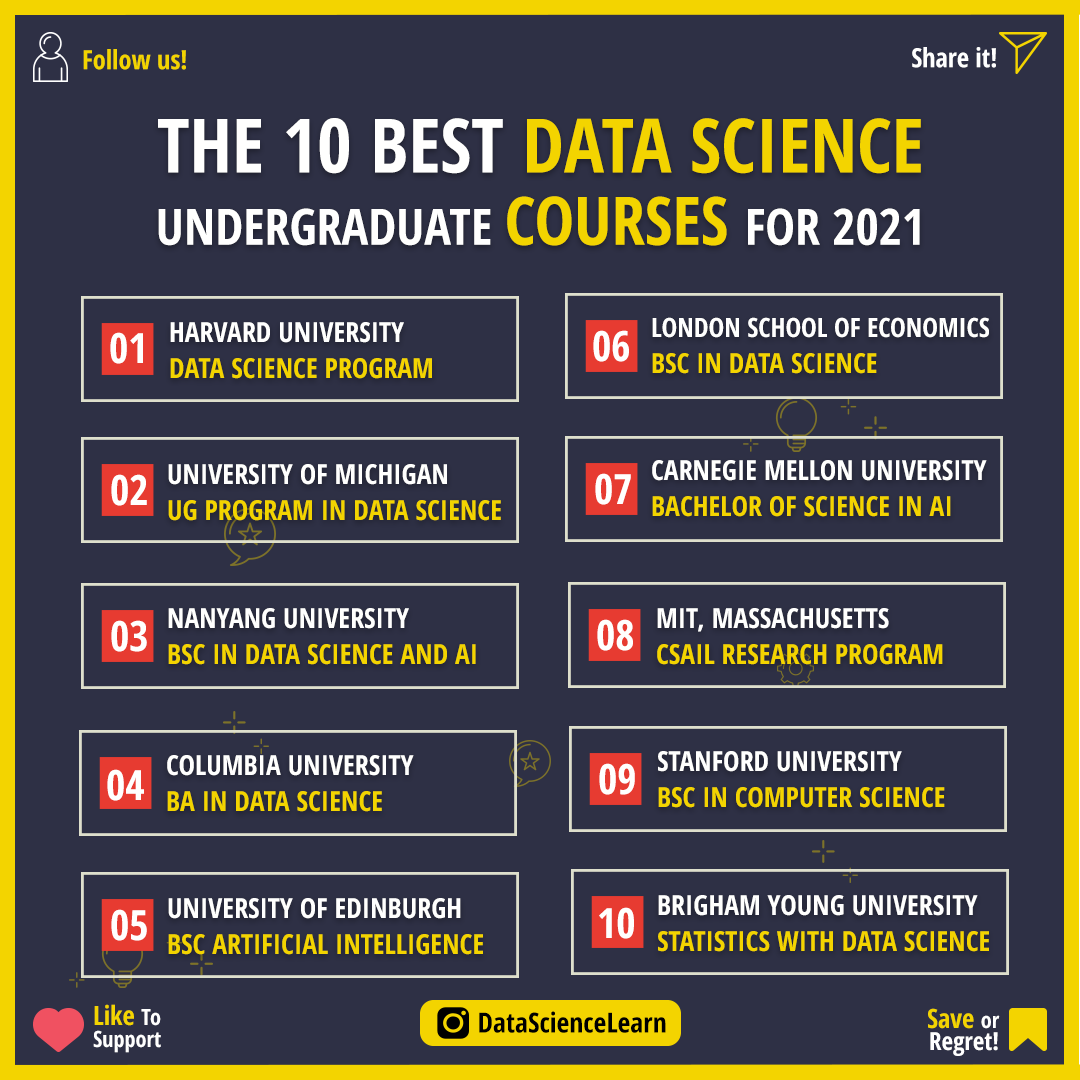
<style>
.page{position:relative;width:1080px;height:1080px;background:#2e3045}
.page>*{position:absolute;margin:0}
.t1{font:26.4px "OpenSans-CondensedBold";color:#f3d400}
.t2{font:26.4px "OpenSans-CondensedBold";color:#ffffff}
.t3{font:50px/72.2px "OpenSans-CondensedBold";color:#fffffe}
.t4{font:75px/72.2px "OpenSans-CondensedBold";color:#fffffe}
.t5{font:75px/72.2px "OpenSans-CondensedBold";color:#f3d400}
.t6{font:66.7px/72.2px "OpenSans-CondensedBold";color:#f3d400}
.t7{font:26.4px/33.3px "OpenSans-CondensedBold";color:#fffffe}
.t8{font:27.8px/36.1px "OpenSans-CondensedBold";color:#f3d400}
.t9{font:27.8px/36.1px "OpenSans-CondensedBold";color:#fffffe}
.t10{font:41.7px "OpenSans-CondensedBold";color:#fffffe}
.t11{font:22.2px/22.2px "OpenSans-CondensedBold";color:#ffffff}
.t12{font:26.4px/22.2px "OpenSans-CondensedBold";color:#f3d400}
.t13{font:27.8px "OpenSans-CondensedBold";color:#000000}
.t14{font:25px/22.2px "OpenSans-CondensedBold";color:#ffffff}
</style>
<div class="page">
<p class="t1" style="left:83px;top:49px;width:103px;height:21px">Follow us!</p>
<p class="t2" style="left:912px;top:47px;width:84px;height:21px">Share it!</p>
<p class="t3" style="left:158px;top:118px;width:763px;height:128px;text-align:center"><span class="t4">THE 10 BEST </span><span class="t5">DATA SCIENCE<br></span>UNDERGRADUATE <span class="t6">COURSES </span>FOR 2021</p>
<p class="t7" style="left:652px;top:317px;width:337px;height:57px">LONDON SCHOOL OF ECONOMICS<br><span class="t8">BSC IN DATA SCIENCE</span></p>
<p class="t8" style="left:170px;top:322px;width:262px;height:57px"><span class="t9">HARVARD UNIVERSITY <br></span>DATA SCIENCE PROGRAM</p>
<p class="t10" style="left:110px;top:332px;width:33px;height:32px">01</p>
<p class="t10" style="left:593px;top:330px;width:36px;height:32px">06</p>
<p class="t9" style="left:652px;top:460px;width:335px;height:57px">CARNEGIE MELLON UNIVERSITY<br><span class="t8">BACHELOR OF SCIENCE IN AI</span></p>
<p class="t8" style="left:168px;top:464px;width:333px;height:57px"><span class="t9">UNIVERSITY OF MICHIGAN<br></span>UG PROGRAM IN DATA SCIENCE</p>
<p class="t10" style="left:595px;top:473px;width:36px;height:32px">07</p>
<p class="t10" style="left:111px;top:474px;width:36px;height:32px">02</p>
<p class="t8" style="left:168px;top:608px;width:308px;height:57px"><span class="t9">NANYANG UNIVERSITY<br></span>BSC IN DATA SCIENCE AND AI</p>
<p class="t8" style="left:657px;top:608px;width:286px;height:57px"><span class="t9">MIT, MASSACHUSETTS<br></span>CSAIL RESEARCH PROGRAM</p>
<p class="t10" style="left:111px;top:620px;width:36px;height:32px">03</p>
<p class="t10" style="left:597px;top:619px;width:36px;height:32px">08</p>
<p class="t9" style="left:167px;top:755px;width:247px;height:57px">COLUMBIA UNIVERSITY<br><span class="t8">BA IN DATA SCIENCE</span></p>
<p class="t8" style="left:658px;top:751px;width:287px;height:57px"><span class="t9">STANFORD UNIVERSITY <br></span>BSC IN COMPUTER SCIENCE</p>
<p class="t10" style="left:107px;top:769px;width:37px;height:32px">04</p>
<p class="t10" style="left:599px;top:763px;width:36px;height:32px">09</p>
<p class="t8" style="left:168px;top:898px;width:315px;height:57px"><span class="t9">UNIVERSITY OF EDINBURGH<br></span>BSC ARTIFICIAL INTELLIGENCE</p>
<p class="t8" style="left:658px;top:895px;width:331px;height:57px"><span class="t9">BRIGHAM YOUNG UNIVERSITY<br></span>STATISTICS WITH DATA SCIENCE</p>
<p class="t10" style="left:111px;top:909px;width:36px;height:32px">05</p>
<p class="t10" style="left:599px;top:907px;width:35px;height:32px">10</p>
<p class="t11" style="left:93px;top:1004px;width:68px;height:49px"><span class="t12">Like </span>To<br>Support</p>
<p class="t13" style="left:479px;top:1011px;width:187px;height:22px">DataScienceLearn</p>
<p class="t14" style="left:928px;top:1008px;width:72px;height:48px;text-align:right"><span class="t12">Save </span><span class="t11">or<br></span>Regret!</p>
</div>
